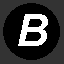
<style>
.page{position:relative;width:64px;height:64px;background:#000000}
.page>*{position:absolute;margin:0}
.t1{font:44px "Arial-BoldItalicMT";color:#ffffff}
</style>
<div class="page">
<p class="t1" style="left:18px;top:14px;width:30px;height:32px">B</p>
</div>
